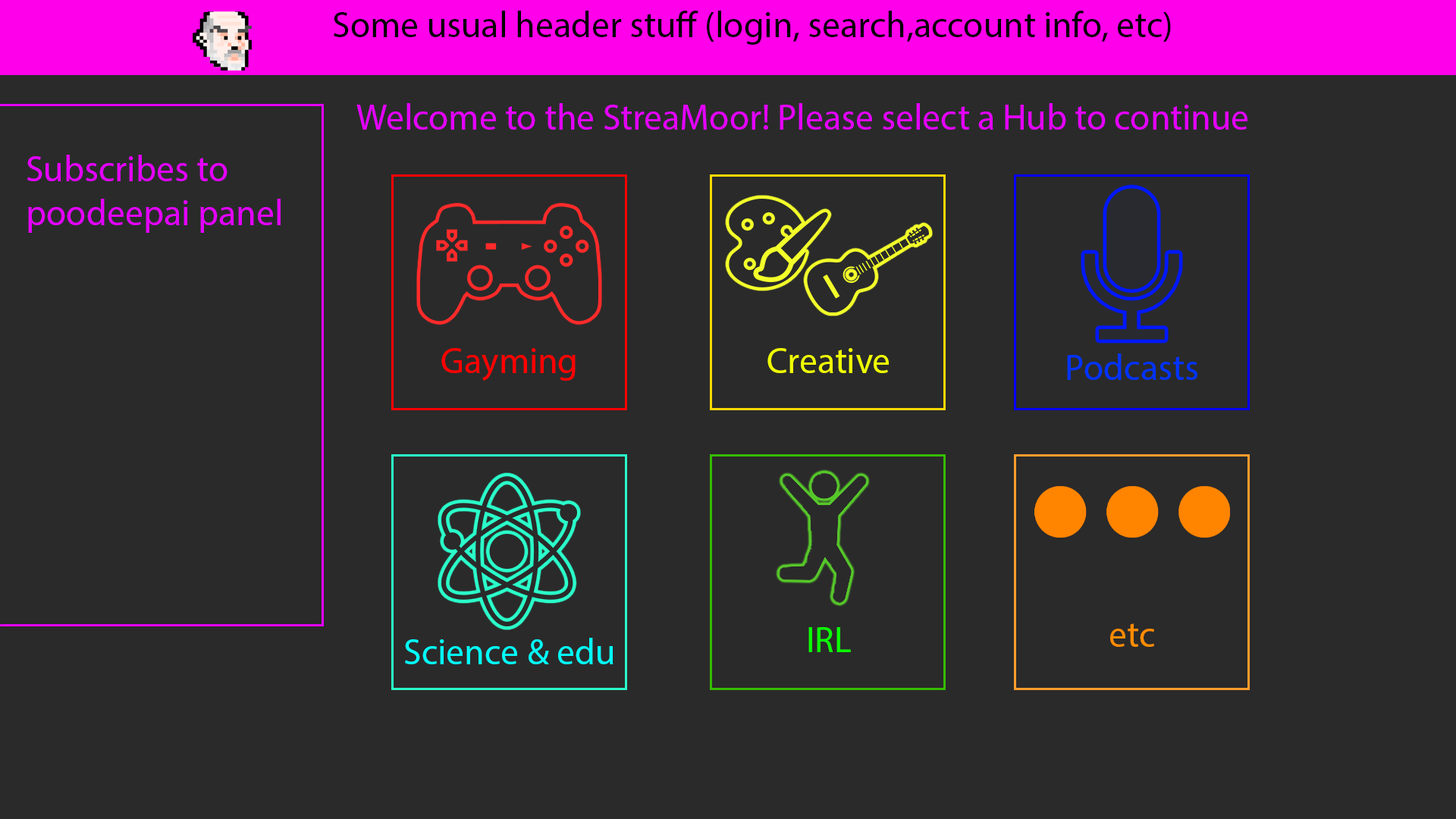
<style>
.page{position:relative;width:1456px;height:819px;background:#2a2a2a}
.page>*{position:absolute;margin:0}
.t1{font:36.4px "MyriadPro-Regular";color:#e400ff}
.t2{font:36.4px "MyriadPro-Regular";color:#ff0000}
.t3{font:36.4px "MyriadPro-Regular";color:#efff00}
.t4{font:36.4px "MyriadPro-Regular";color:#0033ff}
.t5{font:36.4px "MyriadPro-Regular";color:#09ff00}
.t6{font:36.4px "MyriadPro-Regular";color:#ff8c00}
.t7{font:36.4px "MyriadPro-Regular";color:#00fffb}
</style>
<div class="page">
<p class="t1" style="left:356px;top:103px;width:891px;height:27px">Welcome to the StreaMoor! Please select a Hub to continue</p>
<p class="t1" style="left:27px;top:155px;width:254px;height:78px">Subscribes to poodeepai panel</p>
<p class="t2" style="left:441px;top:348px;width:135px;height:33px">Gayming</p>
<p class="t3" style="left:767px;top:348px;width:122px;height:25px">Creative</p>
<p class="t4" style="left:1067px;top:353px;width:130px;height:27px">Podcasts</p>
<p class="t5" style="left:808px;top:627px;width:43px;height:25px">IRL</p>
<p class="t6" style="left:1110px;top:623px;width:44px;height:24px">etc</p>
<p class="t7" style="left:405px;top:638px;width:208px;height:26px">Science &amp; edu</p>
</div>
